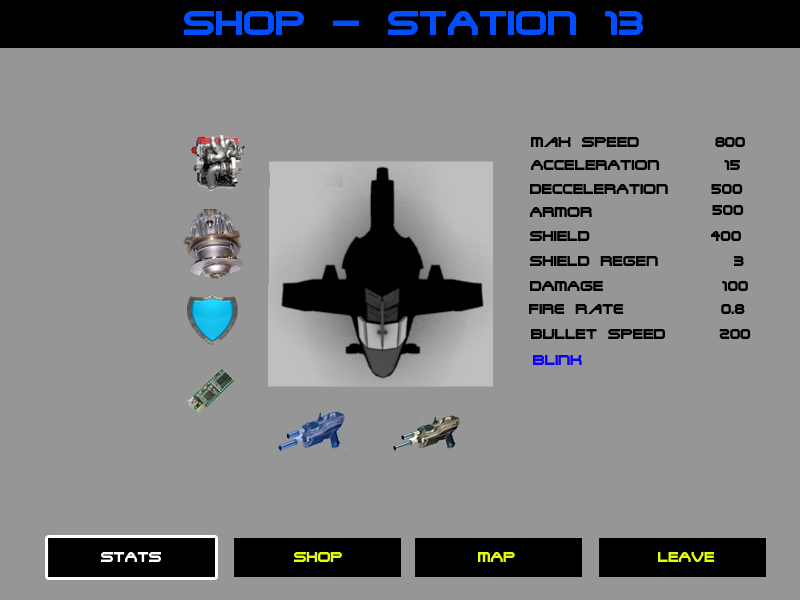
<style>
.page{position:relative;width:800px;height:600px;background:#969696}
.page>*{position:absolute;margin:0}
.t1{font:16px "TerminatorTwo";color:#000000}
.t2{font:16px "TerminatorTwo";color:#0c00ff}
.t3{font:16px "TerminatorTwo";color:#ffffff}
.t4{font:16px "TerminatorTwo";color:#e4ff00}
</style>
<div class="page">
<p class="t1" style="left:531px;top:137px;width:214px;height:10px">Max SPEED       800</p>
<p class="t1" style="left:531px;top:160px;width:209px;height:10px">ACCELERATION      15</p>
<p class="t1" style="left:530px;top:184px;width:213px;height:10px">DECCELERATION    500</p>
<p class="t1" style="left:530px;top:207px;width:62px;height:10px">ARMOR</p>
<p class="t1" style="left:712px;top:205px;width:32px;height:10px">500</p>
<p class="t1" style="left:530px;top:231px;width:60px;height:10px">SHIELD</p>
<p class="t1" style="left:711px;top:231px;width:30px;height:10px">400</p>
<p class="t1" style="left:530px;top:256px;width:214px;height:10px">SHIELD REGEN       3</p>
<p class="t1" style="left:530px;top:281px;width:218px;height:10px">DAMAGE           100</p>
<p class="t1" style="left:529px;top:304px;width:216px;height:10px">Fire Rate         0.8</p>
<p class="t1" style="left:531px;top:329px;width:220px;height:10px">BULLET SPEED     200</p>
<p class="t2" style="left:533px;top:355px;width:49px;height:10px">BLINK</p>
<p class="t3" style="left:101px;top:552px;width:60px;height:10px">STATS</p>
<p class="t4" style="left:294px;top:552px;width:48px;height:10px">SHOP</p>
<p class="t4" style="left:478px;top:552px;width:37px;height:10px">MAP</p>
<p class="t4" style="left:658px;top:552px;width:57px;height:10px">LEAVE</p>
</div>
